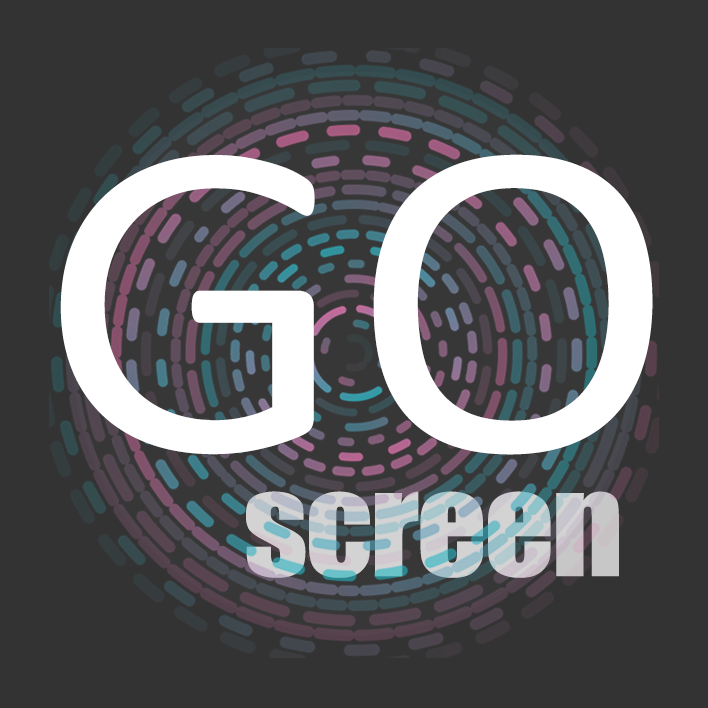
<style>
.page{position:relative;width:708px;height:708px;background:#333333}
.page>*{position:absolute;margin:0}
.t1{font:460.3px "Calibri";color:#ffffff;scale:1.07 1}
.t2{font:128.2px "Impact";letter-spacing:-0.02em;color:#c8c8ce;scale:1.07 1}
</style>
<div class="page">
<p class="t1" style="left:60px;top:154px;width:593px;height:301px">GO</p>
<p class="t2" style="left:246px;top:491px;width:373px;height:87px">screen</p>
</div>
